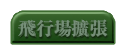
<style>
.page{position:relative;width:126px;height:55px;background:#ffffff}
.page>*{position:absolute;margin:0}
.t1{font:18px "RyuminPr6N-ExBold";color:#758e77}
</style>
<div class="page">
<p class="t1" style="left:18px;top:19px;width:90px;height:18px">飛行場擴張</p>
</div>
